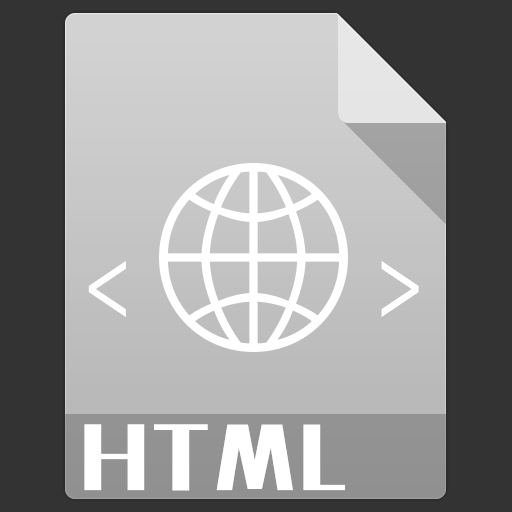
<style>
.page{position:relative;width:512px;height:512px;background:#333333}
.page>*{position:absolute;margin:0}
.t1{font:99px "SourceCodeProYaHeiHybrid";letter-spacing:0.07em;color:#ffffff}
.t2{font:72px "MFLiHei_Noncommercial-Regular";letter-spacing:0.07em;color:#ffffff}
</style>
<div class="page">
<p class="t1" style="left:88px;top:261px;width:331px;height:56px">&lt;    &gt;</p>
<p class="t2" style="left:84px;top:424px;width:261px;height:67px">HTML</p>
</div>
